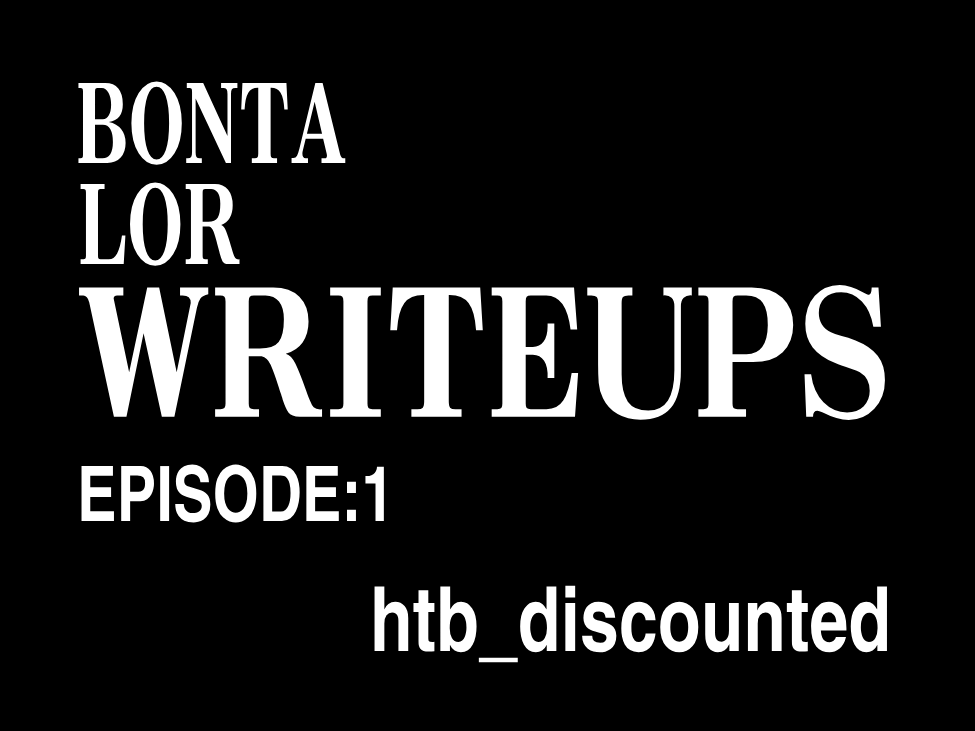
<style>
.page{position:relative;width:975px;height:731px;background:#000000}
.page>*{position:absolute;margin:0}
.t1{font:97px "NIS-M9P-83pv-RKSJ-H";color:#ffffff;scale:0.7 1}
.t2{font:157px "NIS-M9P-83pv-RKSJ-H";color:#ffffff;scale:0.86 1}
.t3{font:76.5px "Helvetica-NarrowBold";color:#ffffff;scale:0.78 1}
.t4{font:90px "Helvetica-NarrowBold";color:#ffffff;scale:0.78 1}
</style>
<div class="page">
<p class="t1" style="left:78px;top:81px;width:268px;height:84px">BONTA</p>
<p class="t1" style="left:80px;top:182px;width:160px;height:84px">LOR</p>
<p class="t2" style="left:79px;top:284px;width:806px;height:136px">WRITEUPS</p>
<p class="t3" style="left:81px;top:464px;width:303px;height:59px">EPISODE:1</p>
<p class="t4" style="left:374px;top:585px;width:513px;height:78px">htb_discounted</p>
</div>
